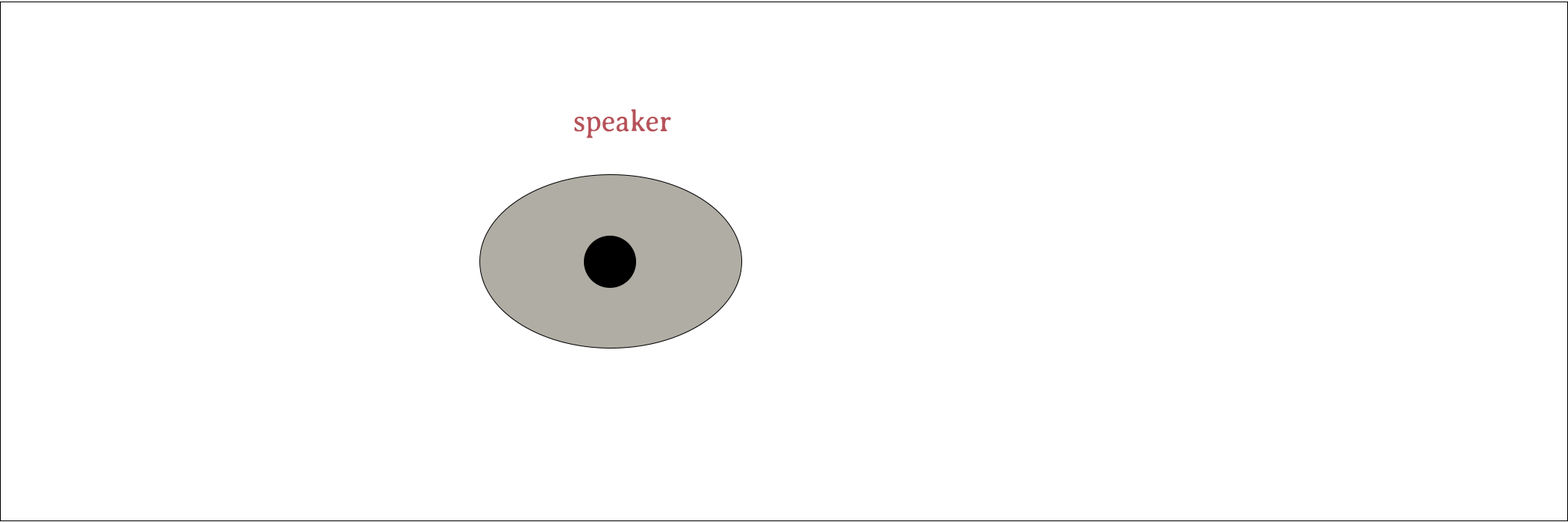
<style>
.page{position:relative;width:1568px;height:522px;background:#ffffff}
.page>*{position:absolute;margin:0}
.t1{font:30.7px "AveriaSerifLibre-Regular";color:#b75259;scale:0.91 1}
</style>
<div class="page">
<p class="t1" style="left:574px;top:109px;width:97px;height:29px">speaker</p>
</div>
